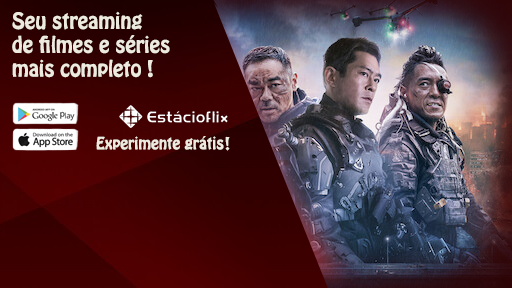
<style>
.page{position:relative;width:512px;height:288px}
.page>*{position:absolute;margin:0}
.t1{font:19.9px "HoboStd";color:#edebdf}
.t2{font:14.9px "HoboStd";color:#edebdf}
.t3{font:15.7px "HoboStd";color:#edebdf}
</style>
<div class="page">
<p class="t1" style="left:12px;top:11px;width:158px;height:67px;text-align:right">Seu streaming<br> de filmes e séries<br>! mais completo</p>
<p class="t2" style="left:96px;top:136px;width:128px;height:14px">Experimente grátis</p>
<p class="t3" style="left:225px;top:136px;width:5px;height:15px">!</p>
</div>
